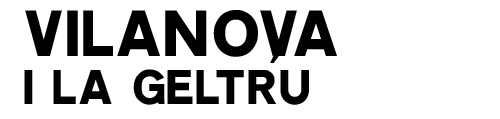
<style>
.page{position:relative;width:500px;height:119px;background:#ffffff}
.page>*{position:absolute;margin:0}
.t1{font:48px/48px "Ccrige-Regular";color:#000000}
.t2{font:64px/64px "Ccrige-Regular";color:#000000}
</style>
<div class="page">
<p class="t1" style="left:24px;top:10px;width:313px;height:95px"><span class="t2">VILANOVA<br></span>I LA GELTRÚU</p>
</div>
